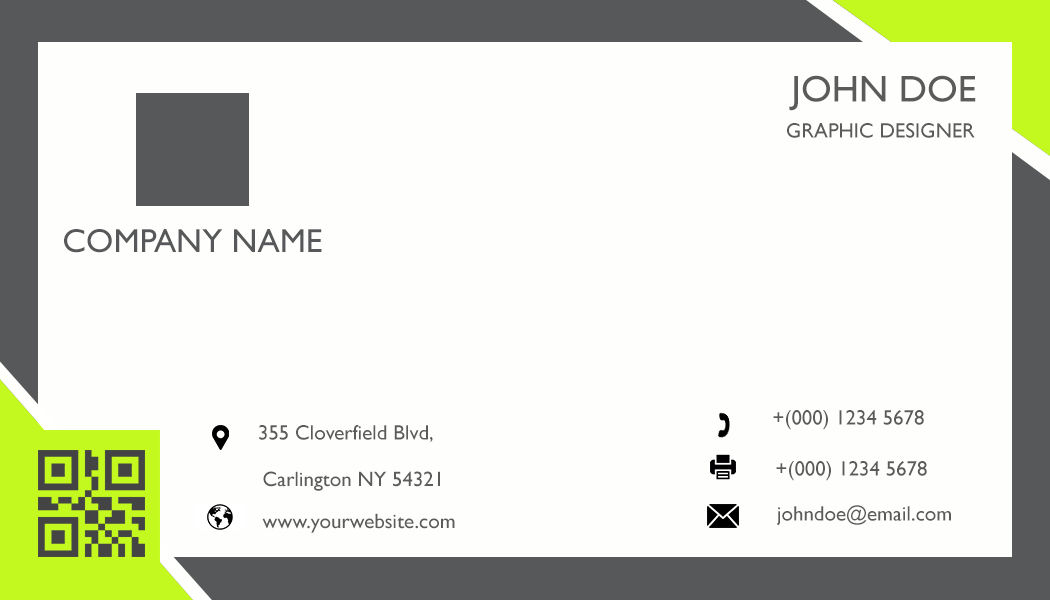
<style>
.page{position:relative;width:1050px;height:600px;background:#fefefc}
.page>*{position:absolute;margin:0}
.t1{font:37.5px "GillSansMT";color:#5b5b5a}
.t2{font:20.8px "GillSansMT";color:#5b5b5a}
.t3{font:33.3px "GillSansMT";color:#575859}
</style>
<div class="page">
<p class="t1" style="left:789px;top:75px;width:187px;height:36px">JOHN DOE</p>
<p class="t2" style="left:787px;top:123px;width:188px;height:15px">GRAPHIC DESIGNER</p>
<p class="t3" style="left:64px;top:229px;width:258px;height:24px">COMPANY NAME</p>
<p class="t2" style="left:773px;top:410px;width:151px;height:20px">+(000) 1234 5678</p>
<p class="t2" style="left:259px;top:425px;width:174px;height:17px">355 Cloverfield Blvd,</p>
<p class="t2" style="left:776px;top:461px;width:151px;height:20px">+(000) 1234 5678</p>
<p class="t2" style="left:263px;top:471px;width:177px;height:20px">Carlington NY 54321</p>
<p class="t2" style="left:776px;top:505px;width:175px;height:21px">johndoe@email.com</p>
<p class="t2" style="left:262px;top:513px;width:193px;height:20px">www.yourwebsite.com</p>
</div>
